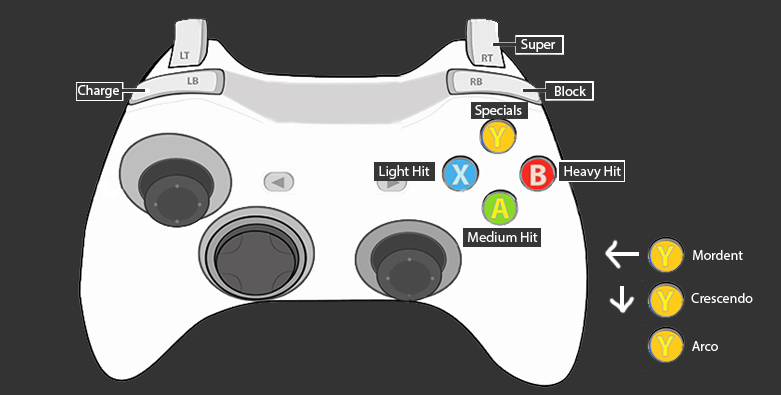
<style>
.page{position:relative;width:781px;height:395px;background:#333333}
.page>*{position:absolute;margin:0}
.t1{font:14px "MyriadPro-Regular";color:#ffffff}
</style>
<div class="page">
<p class="t1" style="left:521px;top:39px;width:35px;height:13px">Super</p>
<p class="t1" style="left:78px;top:85px;width:41px;height:13px">Charge</p>
<p class="t1" style="left:555px;top:86px;width:31px;height:10px">Block</p>
<p class="t1" style="left:475px;top:105px;width:47px;height:13px">Specials</p>
<p class="t1" style="left:693px;top:250px;width:50px;height:10px">Mordent</p>
<p class="t1" style="left:691px;top:293px;width:62px;height:10px">Crescendo</p>
<p class="t1" style="left:692px;top:341px;width:26px;height:10px">Arco</p>
</div>
